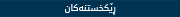
<style>
.page{position:relative;width:180px;height:17px;background:#003351}
.page>*{position:absolute;margin:0}
.t1{font:9px "DroidArabicKufi";color:#ffffff}
</style>
<div class="page">
<p class="t1" style="left:65px;top:3px;width:51px;height:12px">ڕێکخستنەکان</p>
</div>
